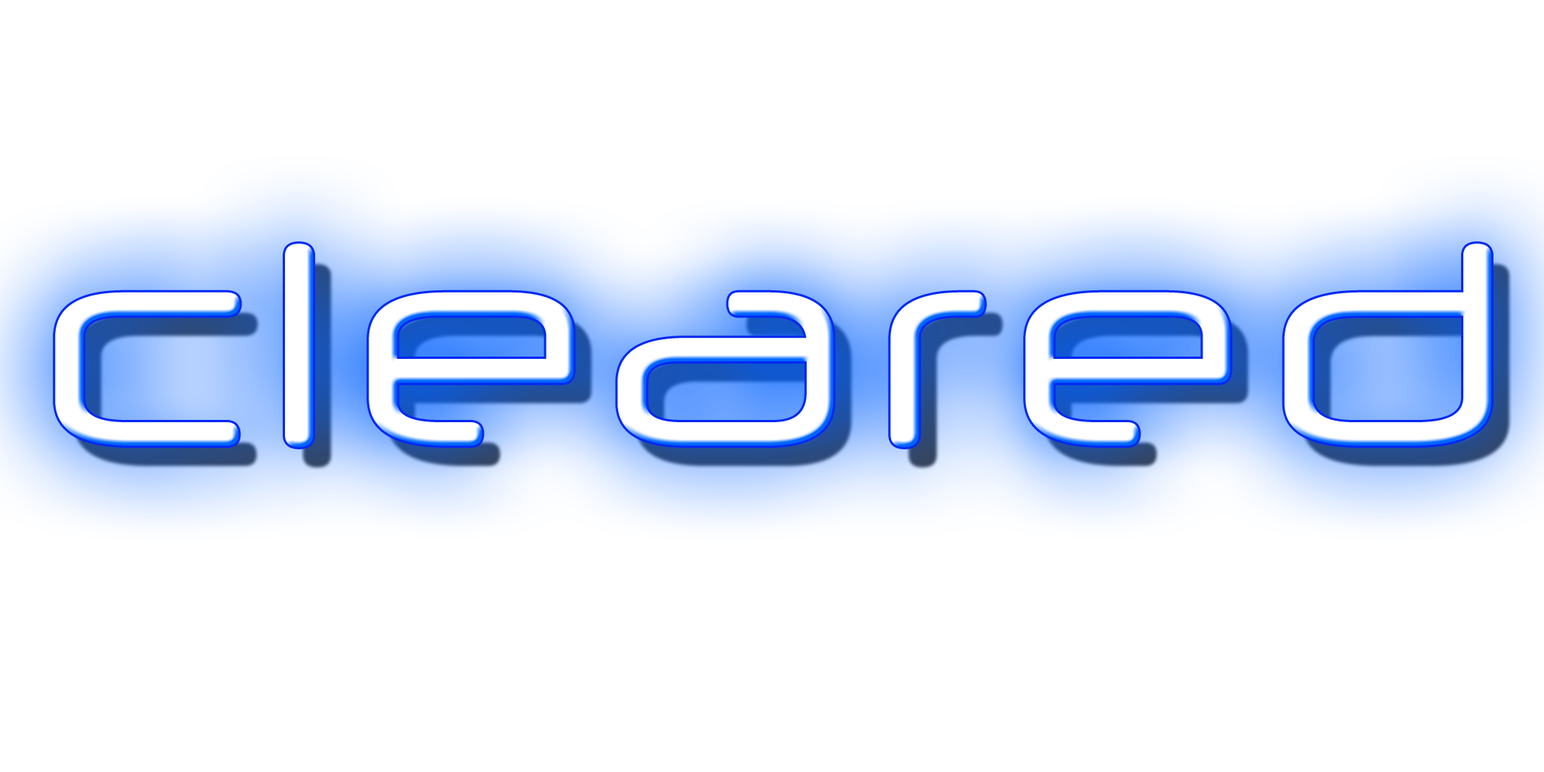
<style>
.page{position:relative;width:1544px;height:772px;background:#ffffff}
.page>*{position:absolute;margin:0}
.t1{font:286.5px "NeuropolXFree";color:#ffffff}
</style>
<div class="page">
<p class="t1" style="left:55px;top:244px;width:1437px;height:203px">cleared</p>
</div>
